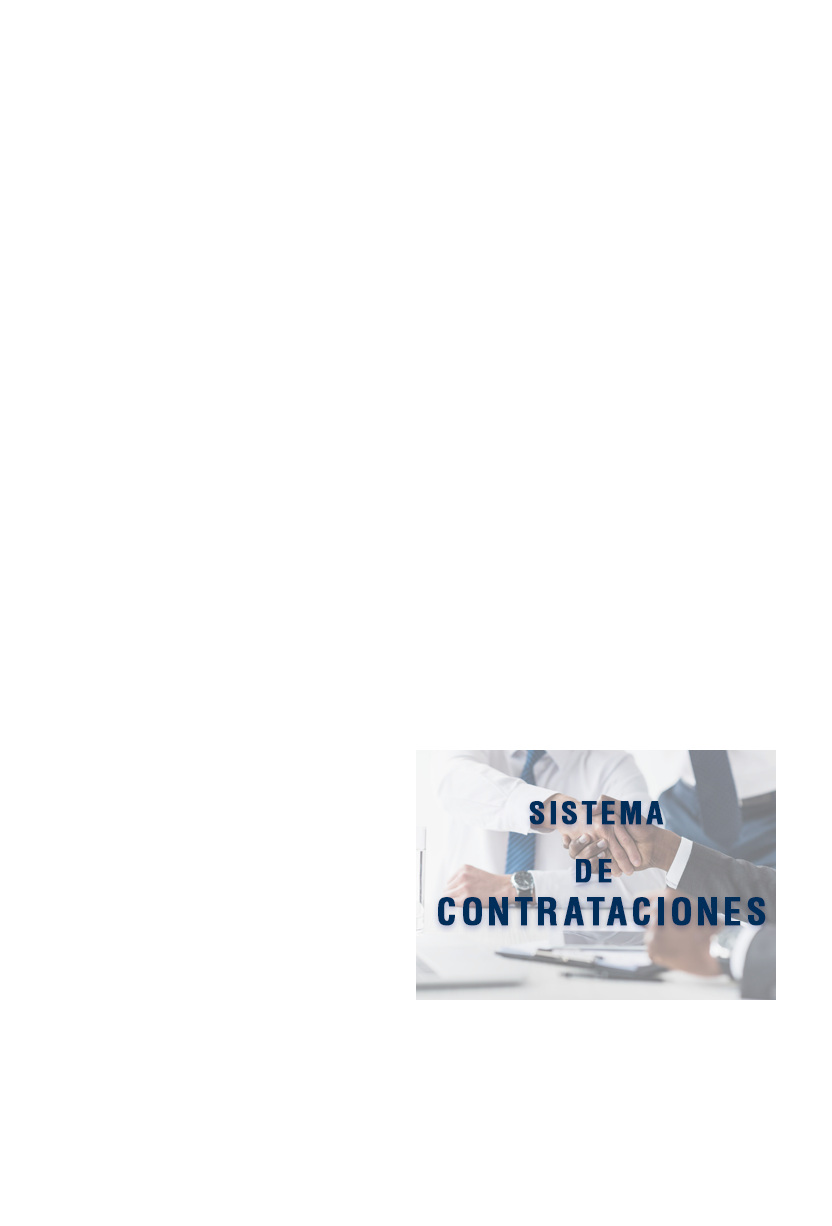
<style>
.page{position:relative;width:832px;height:1226px;background:#ffffff}
.page>*{position:absolute;margin:0}
.t1{font:36px "Helvetica-Condensed-Bold";letter-spacing:0.1em;color:#002e5b;font-weight:bold}
.t2{font:30px "Helvetica-Condensed-Bold";letter-spacing:0.1em;color:#002e5b;font-weight:bold}
</style>
<div class="page">
<p class="t1" style="left:438px;top:801px;width:328px;height:125px;text-align:center"><span class="t2">SISTEMA <br>DE <br></span>CONTRATACIONES</p>
</div>
